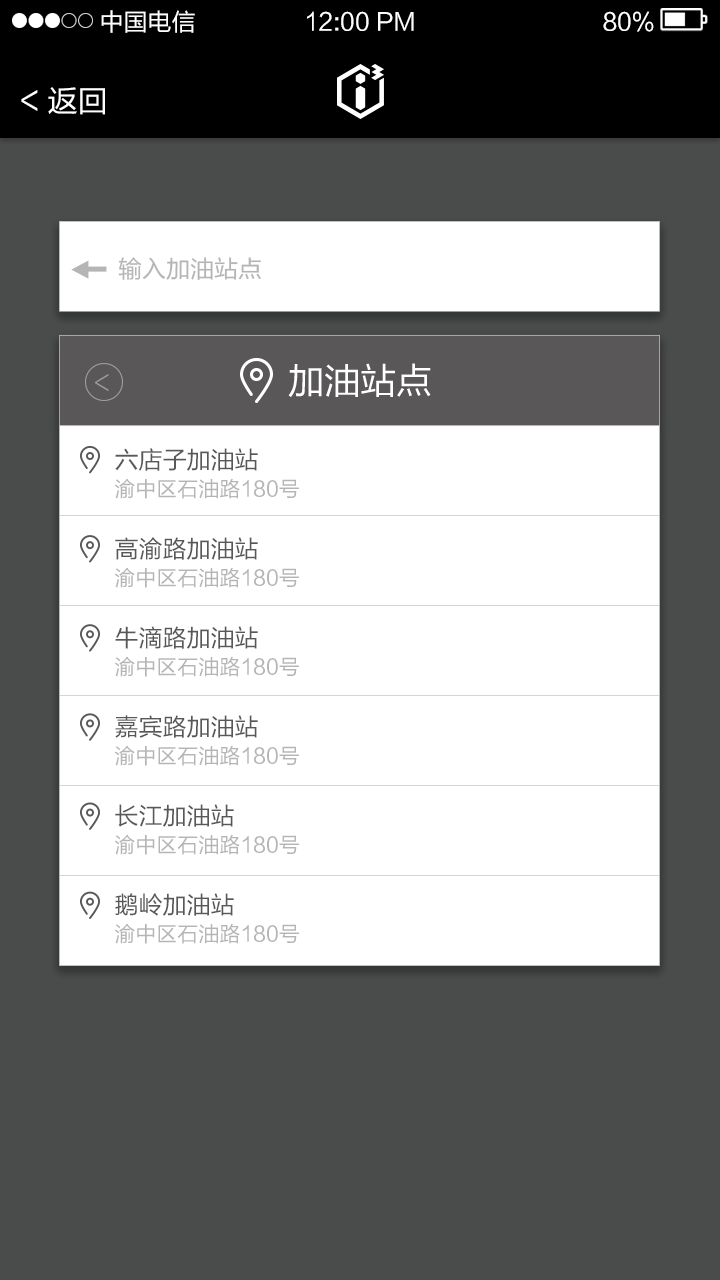
<style>
.page{position:relative;width:720px;height:1280px;background:#ffffff}
.page>*{position:absolute;margin:0}
.t1{font:24px "FZLTHK--GBK1-0";color:#ffffff}
.t2{font:30px "FZLTHK--GBK1-0";color:#ffffff}
.t3{font:24px/89px "FZLTHK--GBK1-0";color:#595757}
.t4{font:21px/89px "FZLTHK--GBK1-0";color:#b5b5b6}
</style>
<div class="page">
<p class="t1" style="left:101px;top:10px;width:94px;height:23px">中国电信</p>
<p class="t1" style="left:307px;top:11px;width:107px;height:20px">12:00 PM</p>
<p class="t1" style="left:603px;top:11px;width:51px;height:21px">80%</p>
<p class="t2" style="left:21px;top:87px;width:84px;height:28px">&lt; 返回</p>
<p class="t3" style="left:115px;top:448px;width:143px;height:468px">六店子加油站<br>高渝路加油站<br>牛滴路加油站<br>嘉宾路加油站<br>长江加油站<br>鹅岭加油站</p>
<p class="t4" style="left:115px;top:478px;width:184px;height:466px">渝中区石油路180号<br>渝中区石油路180号<br>渝中区石油路180号<br>渝中区石油路180号<br>渝中区石油路180号<br>渝中区石油路180号</p>
</div>
